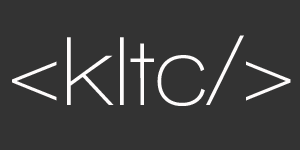
<style>
.page{position:relative;width:300px;height:150px;background:#333333}
.page>*{position:absolute;margin:0}
.t1{font:100px "WalkwaySemiBold";color:#fefcfc}
</style>
<div class="page">
<p class="t1" style="left:12px;top:35px;width:279px;height:71px">&lt;kltc/&gt;</p>
</div>
